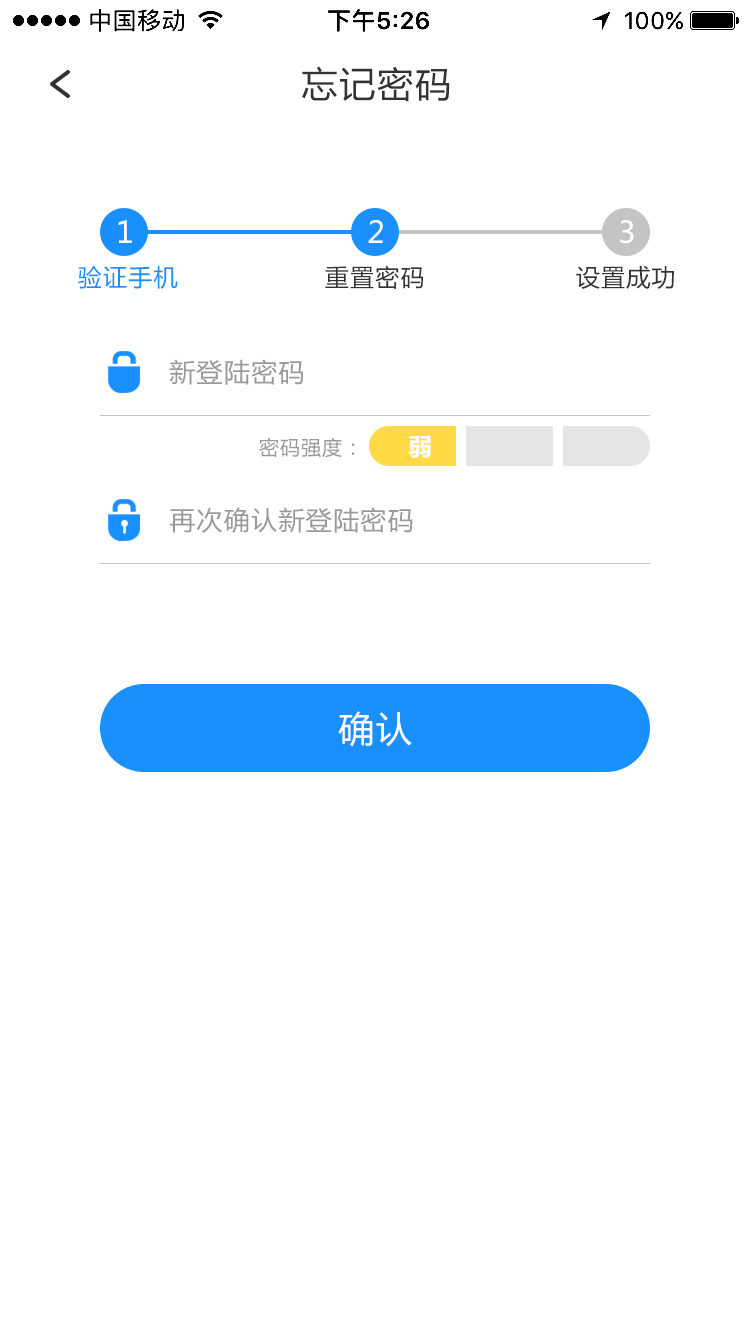
<style>
.page{position:relative;width:750px;height:1334px;background:#ffffff}
.page>*{position:absolute;margin:0}
.t1{font:36px "MicrosoftYaHei";letter-spacing:0.05em;color:#333333}
.t2{font:30px "MicrosoftYaHei";letter-spacing:0.05em;color:#ffffff}
.t3{font:24px "MicrosoftYaHei";letter-spacing:0.05em;color:#1990fe}
.t4{font:24px "MicrosoftYaHei";letter-spacing:0.05em;color:#333333}
.t5{font:26px "MicrosoftYaHei";letter-spacing:0.05em;color:#999999}
.t6{font:20px "MicrosoftYaHei";letter-spacing:0.05em;color:#999999}
.t7{font:24px "MicrosoftYaHei-Bold";letter-spacing:0.05em;color:#ffffff}
.t8{font:36px "MicrosoftYaHei";letter-spacing:0.05em;color:#ffffff}
</style>
<div class="page">
<p class="t1" style="left:302px;top:66px;width:148px;height:36px">忘记密码</p>
<p class="t2" style="left:118px;top:220px;width:14px;height:23px">1</p>
<p class="t2" style="left:368px;top:220px;width:15px;height:23px">2</p>
<p class="t2" style="left:620px;top:220px;width:14px;height:24px">3</p>
<p class="t3" style="left:78px;top:265px;width:100px;height:24px">验证手机</p>
<p class="t4" style="left:325px;top:265px;width:98px;height:24px">重置密码</p>
<p class="t4" style="left:576px;top:265px;width:98px;height:24px">设置成功</p>
<p class="t5" style="left:169px;top:359px;width:135px;height:26px">新登陆密码</p>
<p class="t6" style="left:259px;top:437px;width:96px;height:21px">密码强度：</p>
<p class="t7" style="left:408px;top:436px;width:23px;height:22px">弱</p>
<p class="t5" style="left:169px;top:507px;width:244px;height:26px">再次确认新登陆密码</p>
<p class="t8" style="left:338px;top:711px;width:74px;height:36px">确认</p>
</div>
